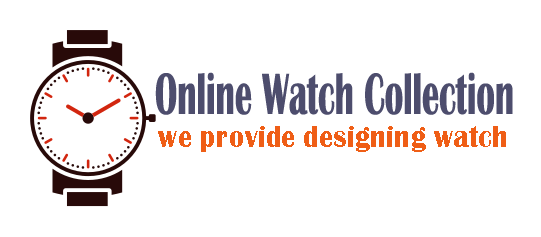
<style>
.page{position:relative;width:541px;height:237px;background:#ffffff}
.page>*{position:absolute;margin:0}
.t1{font:60.4px "BritannicBold";color:#4d4d6d;scale:0.57 1}
.t2{font:31.5px "BritannicBold";color:#ef5e16;scale:0.89 1}
</style>
<div class="page">
<p class="t1" style="left:155px;top:72px;width:358px;height:43px">Online Watch Collection</p>
<p class="t2" style="left:158px;top:126px;width:348px;height:26px">we provide designing watch</p>
</div>
